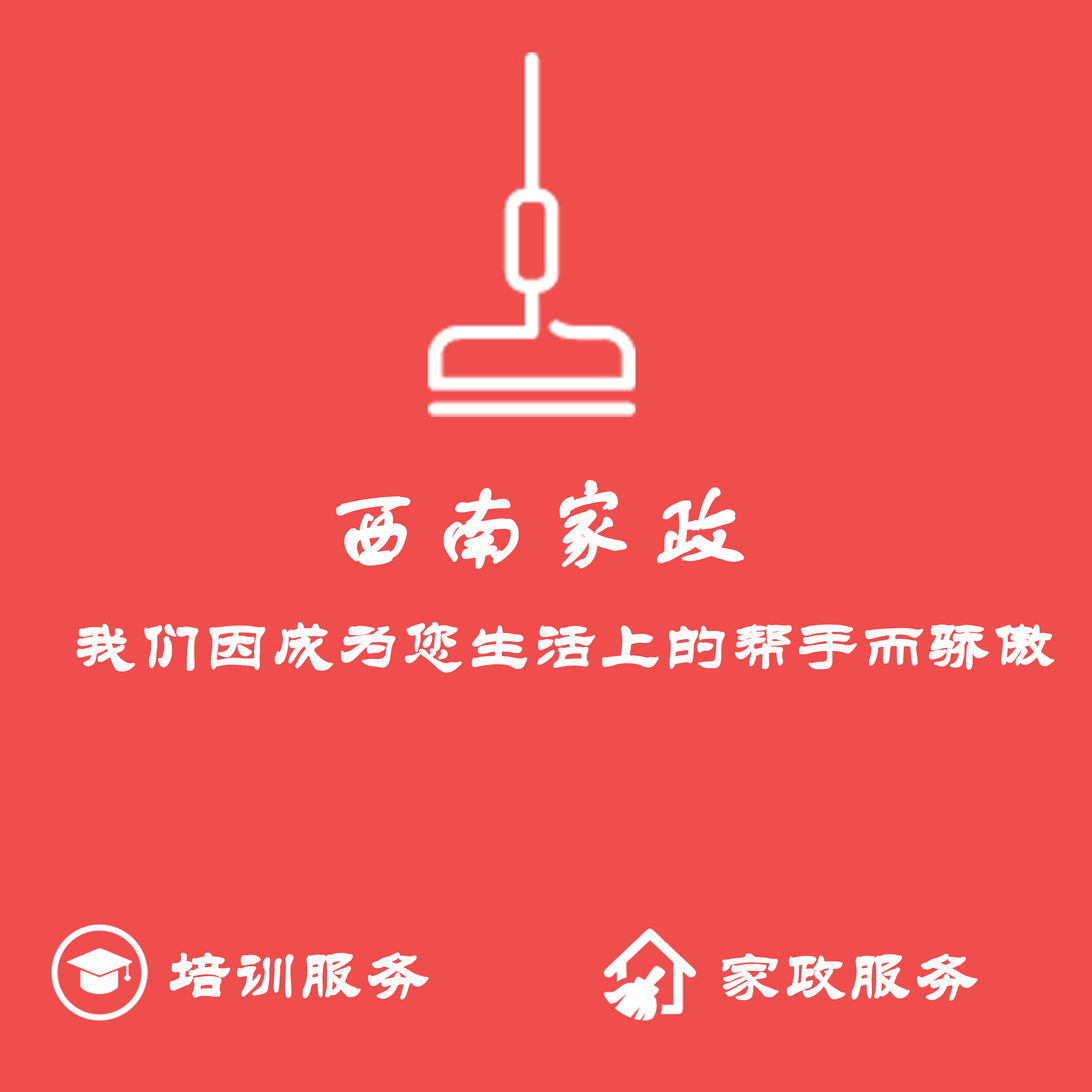
<style>
.page{position:relative;width:1092px;height:1092px;background:#f04d4d}
.page>*{position:absolute;margin:0}
.t1{font:104.7px "FZSTK--GBK1-0";color:#ffffff;font-weight:bold}
.t2{font:64px "STLiti";color:#ffffff;font-weight:bold}
</style>
<div class="page">
<p class="t1" style="left:336px;top:480px;width:408px;height:89px">西南家政</p>
<p class="t2" style="left:77px;top:622px;width:977px;height:51px">我们因成为您生活上的帮手而骄傲</p>
<p class="t2" style="left:169px;top:952px;width:259px;height:48px">培训服务</p>
<p class="t2" style="left:722px;top:953px;width:256px;height:48px">家政服务</p>
</div>
